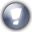
<style>
.page{position:relative;width:32px;height:32px}
.page>*{position:absolute;margin:0}
.t1{font:35px "SquareMetal-7";color:#ffffff}
</style>
<div class="page">
<p class="t1" style="left:10px;top:8px;width:12px;height:17px">!</p>
</div>
